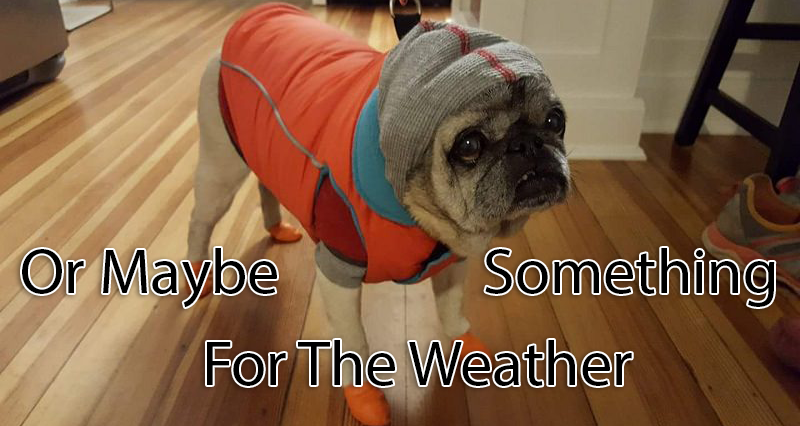
<style>
.page{position:relative;width:800px;height:426px}
.page>*{position:absolute;margin:0}
.t1{font:64px "MyriadPro-Regular";color:#000000}
</style>
<div class="page">
<p class="t1" style="left:22px;top:248px;width:753px;height:60px">Or Maybe               Something</p>
<p class="t1" style="left:207px;top:340px;width:425px;height:46px">For The Weather</p>
</div>
